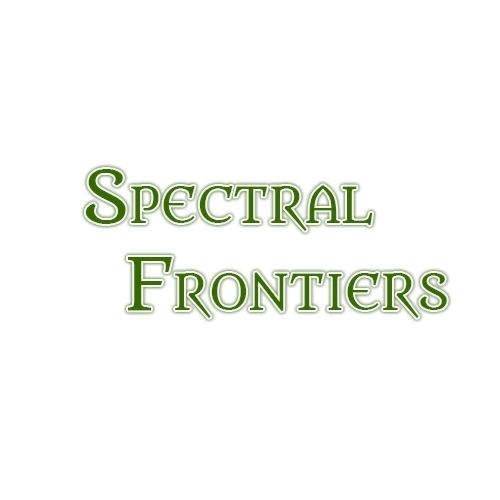
<style>
.page{position:relative;width:500px;height:500px;background:#ffffff}
.page>*{position:absolute;margin:0}
.t1{font:48px "Metamorphous";color:#406419}
.t2{font:72px "Metamorphous";color:#406419}
</style>
<div class="page">
<p class="t1" style="left:85px;top:169px;width:362px;height:149px;text-align:center"><span class="t2">S</span>PECTRAL<br><span class="t2">     F</span>RONTIERS</p>
</div>
